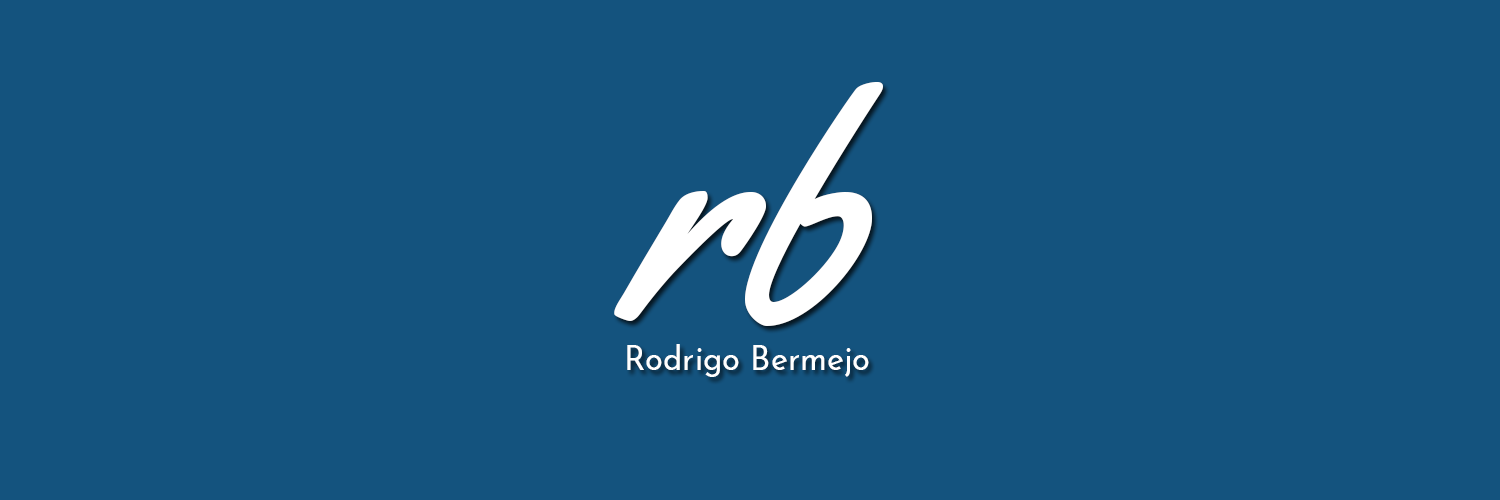
<style>
.page{position:relative;width:1500px;height:500px;background:#14537e}
.page>*{position:absolute;margin:0}
.t1{font:326px "Yellowtail";color:#ffffff}
.t2{font:32.6px "JosefinSans-Regular";color:#ffffff}
</style>
<div class="page">
<p class="t1" style="left:614px;top:82px;width:269px;height:244px">rb</p>
<p class="t2" style="left:627px;top:344px;width:242px;height:33px">Rodrigo Bermejo</p>
</div>
